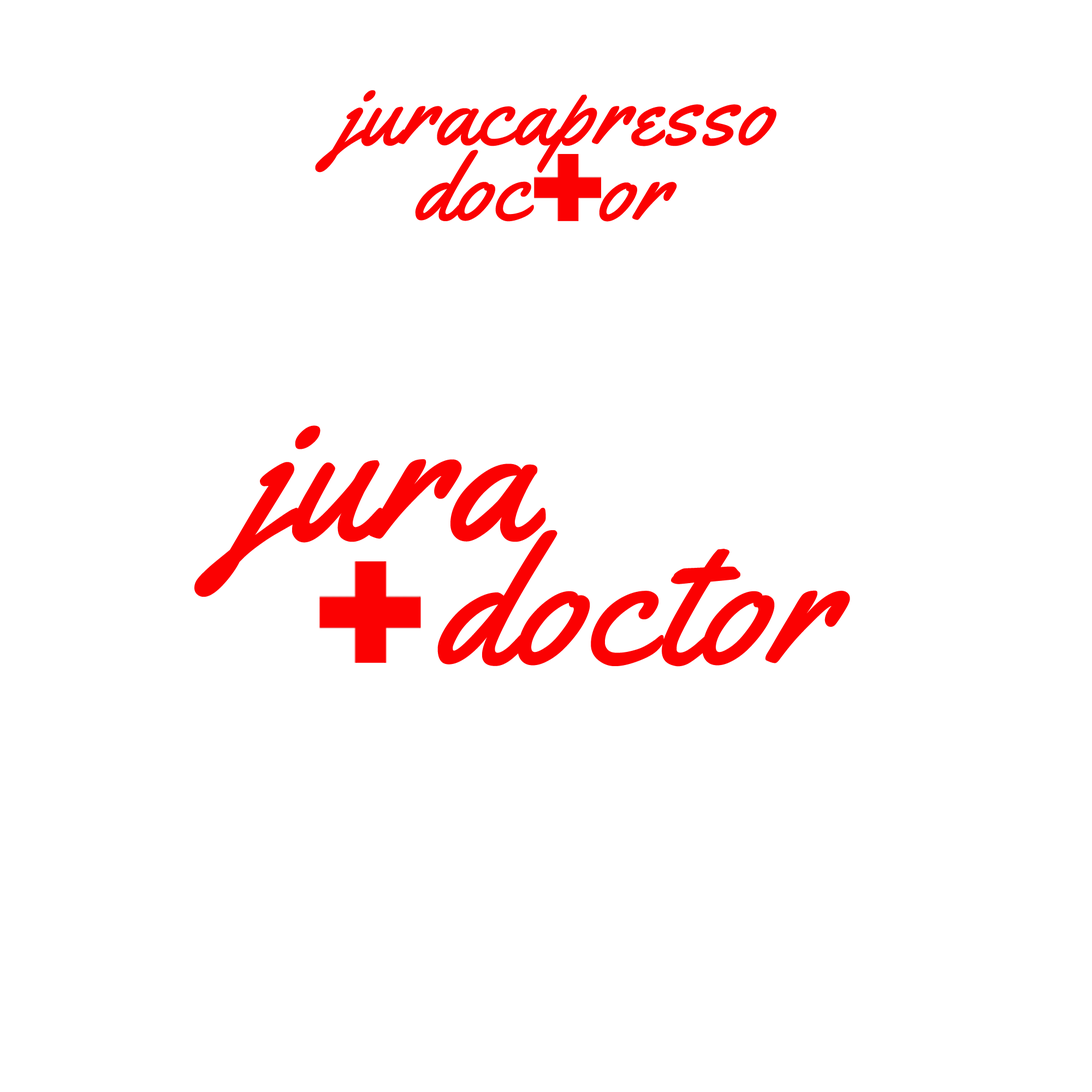
<style>
.page{position:relative;width:1092px;height:1092px;background:#ffffff}
.page>*{position:absolute;margin:0}
.t1{font:94.8px "Yellowtail-Regular";letter-spacing:0.025em;color:#fb0102}
.t2{font:198.8px "Yellowtail-Regular";letter-spacing:0.025em;color:#fb0102}
.t3{font:181.1px "Yellowtail-Regular";letter-spacing:0.025em;color:#fb0102}
</style>
<div class="page">
<p class="t1" style="left:315px;top:90px;width:461px;height:83px">juracapresso</p>
<p class="t1" style="left:415px;top:150px;width:119px;height:72px">doc</p>
<p class="t1" style="left:599px;top:182px;width:78px;height:40px">or</p>
<p class="t2" style="left:194px;top:425px;width:352px;height:172px">jura</p>
<p class="t3" style="left:437px;top:530px;width:413px;height:137px">doctor</p>
</div>
